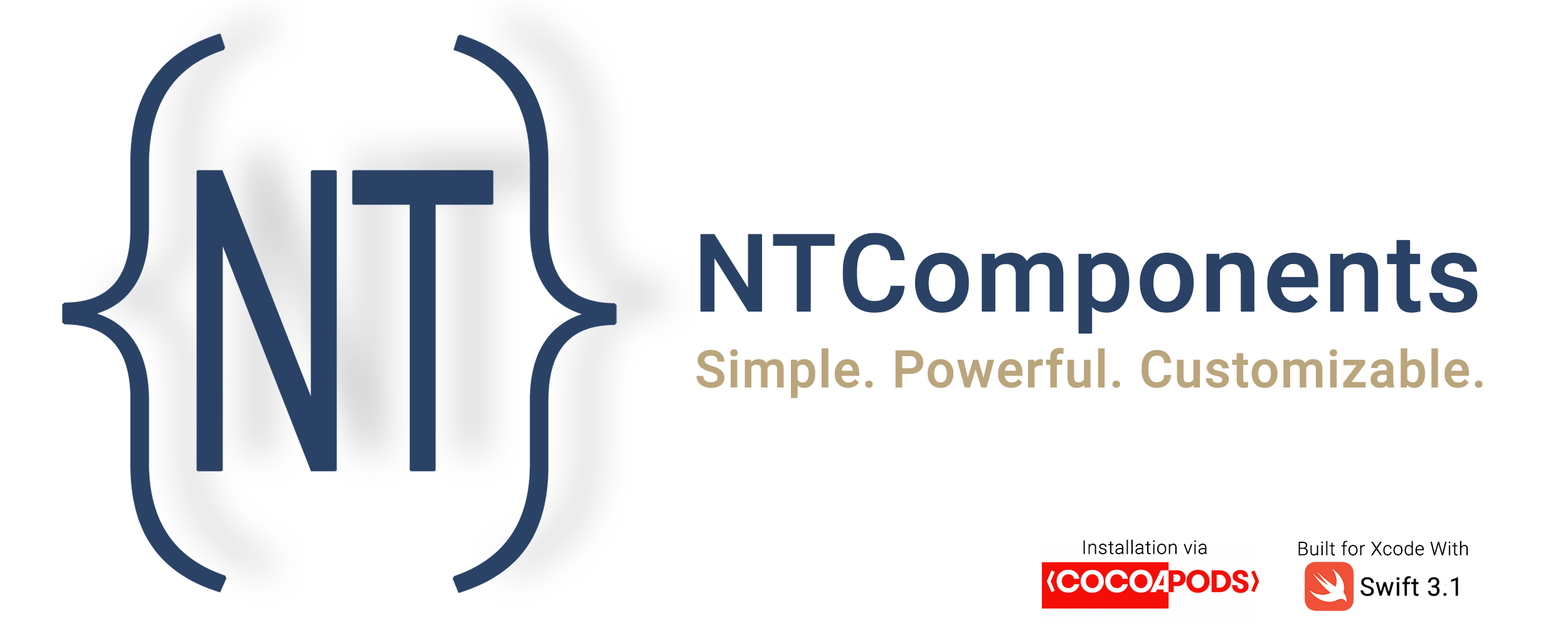
<style>
.page{position:relative;width:1568px;height:627px;background:#ffffff}
.page>*{position:absolute;margin:0}
.t1{font:107.9px "Roboto-Medium";color:#2a4266;font-weight:bold}
.t2{font:51.5px "Roboto-Medium";color:#baa57c;font-weight:bold}
.t3{font:18.8px "Roboto-Light";color:#000000;font-weight:bold}
.t4{font:25.3px "Roboto-Regular";color:#000000;font-weight:bold}
</style>
<div class="page">
<p class="t1" style="left:700px;top:233px;width:778px;height:101px">NTComponents</p>
<p class="t2" style="left:696px;top:347px;width:787px;height:51px">Simple. Powerful. Customizable.</p>
<p class="t3" style="left:1083px;top:539px;width:124px;height:15px">Installation via</p>
<p class="t3" style="left:1298px;top:541px;width:170px;height:15px">Built for Xcode With</p>
<p class="t4" style="left:1360px;top:576px;width:98px;height:20px">Swift 3.1</p>
</div>
